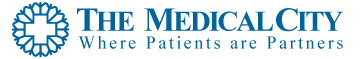
<style>
.page{position:relative;width:360px;height:59px;background:#ffffff}
.page>*{position:absolute;margin:0}
.t1{font:28.6px "TimesNewRomanPS-BoldMT";letter-spacing:-0.08em;color:#00659f;text-transform:uppercase}
.t2{font:33.4px "TimesNewRomanPS-BoldMT";letter-spacing:-0.08em;color:#00659f;text-transform:uppercase}
.t3{font:18px "TimesNewRomanPSMT";letter-spacing:0.14em;color:#00659f}
</style>
<div class="page">
<p class="t1" style="left:77px;top:8px;width:266px;height:24px"><span class="t2">t</span>he <span class="t2"> M</span>edical <span class="t2">C</span>Ity</p>
<p class="t3" style="left:78px;top:36px;width:265px;height:13px">Where Patients are Partners</p>
</div>
